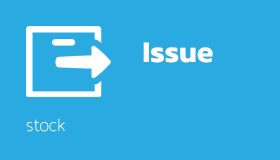
<style>
.page{position:relative;width:280px;height:160px;background:#29abe2}
.page>*{position:absolute;margin:0}
.t1{font:30px "Kanit-SemiBold";color:#ffffff}
.t2{font:18px "Kanit-Thin"}
</style>
<div class="page">
<p class="t1" style="left:143px;top:42px;width:70px;height:21px">Issue</p>
<p class="t2" style="left:26px;top:118px;width:39px;height:14px">stock</p>
</div>
